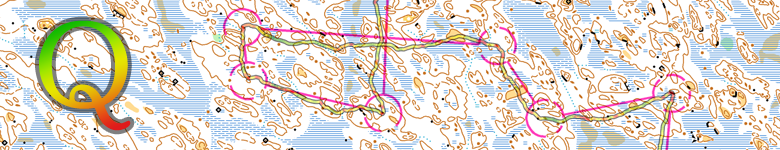
<style>
.page{position:relative;width:780px;height:150px;background:#ffffff}
.page>*{position:absolute;margin:0}
.t1{font:119.6px "PoorRichard-Regular"}
</style>
<div class="page">
<p class="t1" style="left:39px;top:20px;width:92px;height:111px">Q</p>
</div>
